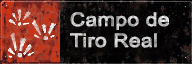
<style>
.page{position:relative;width:192px;height:64px}
.page>*{position:absolute;margin:0}
.t1{font:18.4px/21px "ArialMT";font-weight:bold;scale:1.12 1}
</style>
<div class="page">
<p class="t1" style="left:70px;top:12px;width:99px;height:36px">Campo de<br>Tiro Real</p>
</div>
